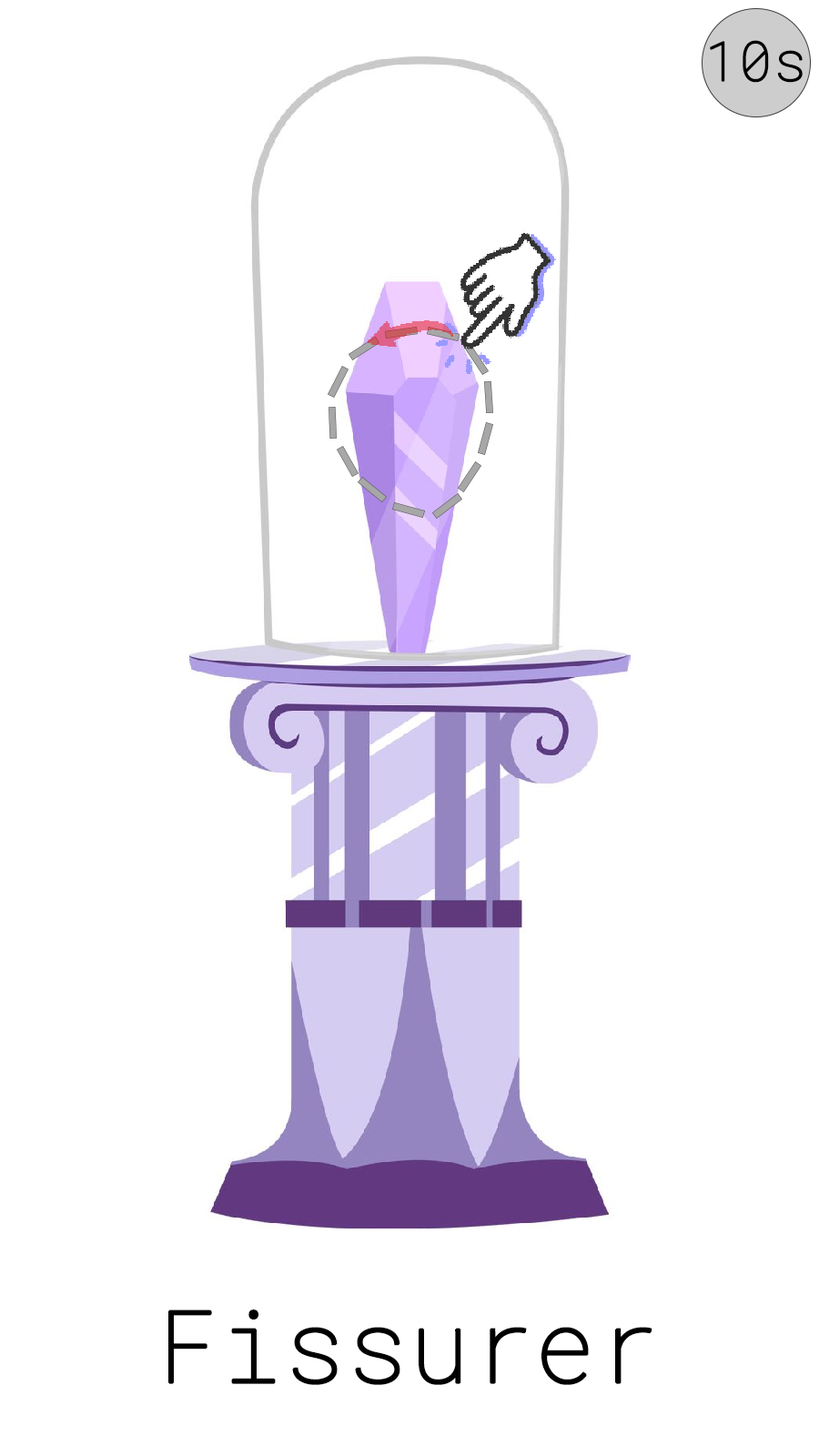
<style>
.page{position:relative;width:819px;height:1456px;background:#ffffff}
.page>*{position:absolute;margin:0}
.t1{font:100px "RobotoMono-Thin";color:#000000;font-weight:bold}
</style>
<div class="page">
<p class="t1" style="left:168px;top:1309px;width:484px;height:76px">Fissurer</p>
</div>
